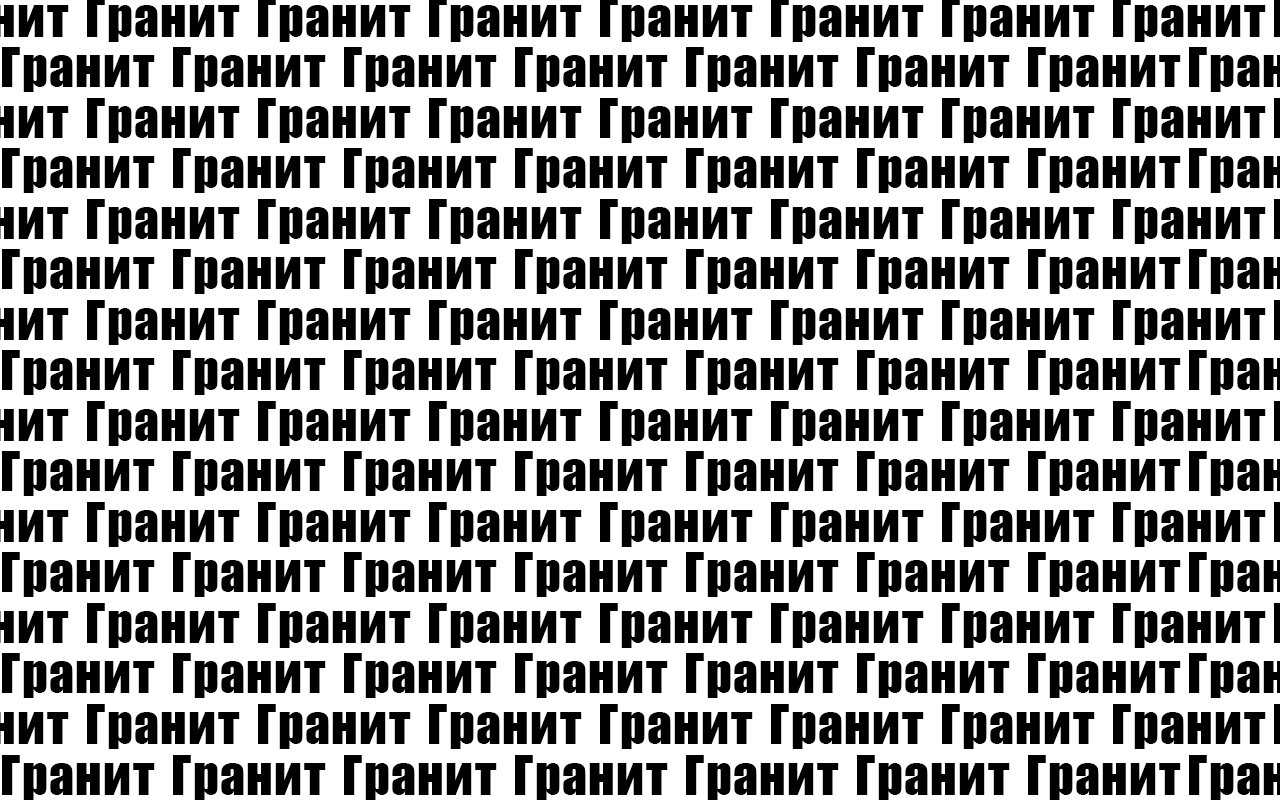
<style>
.page{position:relative;width:1280px;height:800px;background:#ffffff}
.page>*{position:absolute;margin:0}
.t1{font:50px "Impact";letter-spacing:0.025em;color:#000000}
</style>
<div class="page">
<p class="t1" style="left:2px;top:47px;width:153px;height:45px">Гранит</p>
<p class="t1" style="left:173px;top:47px;width:153px;height:45px">Гранит</p>
<p class="t1" style="left:344px;top:47px;width:153px;height:45px">Гранит</p>
<p class="t1" style="left:515px;top:47px;width:153px;height:45px">Гранит</p>
<p class="t1" style="left:686px;top:47px;width:153px;height:45px">Гранит</p>
<p class="t1" style="left:857px;top:47px;width:153px;height:45px">Гранит</p>
<p class="t1" style="left:1028px;top:47px;width:153px;height:45px">Гранит</p>
<p class="t1" style="left:87px;top:98px;width:153px;height:45px">Гранит</p>
<p class="t1" style="left:258px;top:98px;width:153px;height:45px">Гранит</p>
<p class="t1" style="left:429px;top:98px;width:153px;height:45px">Гранит</p>
<p class="t1" style="left:600px;top:98px;width:153px;height:45px">Гранит</p>
<p class="t1" style="left:771px;top:98px;width:153px;height:45px">Гранит</p>
<p class="t1" style="left:942px;top:98px;width:153px;height:45px">Гранит</p>
<p class="t1" style="left:1113px;top:98px;width:153px;height:45px">Гранит</p>
<p class="t1" style="left:2px;top:148px;width:153px;height:45px">Гранит</p>
<p class="t1" style="left:173px;top:148px;width:153px;height:45px">Гранит</p>
<p class="t1" style="left:344px;top:148px;width:153px;height:45px">Гранит</p>
<p class="t1" style="left:515px;top:148px;width:153px;height:45px">Гранит</p>
<p class="t1" style="left:686px;top:148px;width:153px;height:45px">Гранит</p>
<p class="t1" style="left:857px;top:148px;width:153px;height:45px">Гранит</p>
<p class="t1" style="left:1028px;top:148px;width:153px;height:45px">Гранит</p>
<p class="t1" style="left:87px;top:199px;width:153px;height:45px">Гранит</p>
<p class="t1" style="left:258px;top:199px;width:153px;height:45px">Гранит</p>
<p class="t1" style="left:429px;top:199px;width:153px;height:45px">Гранит</p>
<p class="t1" style="left:600px;top:199px;width:153px;height:45px">Гранит</p>
<p class="t1" style="left:771px;top:199px;width:153px;height:45px">Гранит</p>
<p class="t1" style="left:942px;top:199px;width:153px;height:45px">Гранит</p>
<p class="t1" style="left:1113px;top:199px;width:153px;height:45px">Гранит</p>
<p class="t1" style="left:2px;top:249px;width:153px;height:45px">Гранит</p>
<p class="t1" style="left:173px;top:249px;width:153px;height:45px">Гранит</p>
<p class="t1" style="left:344px;top:249px;width:153px;height:45px">Гранит</p>
<p class="t1" style="left:515px;top:249px;width:153px;height:45px">Гранит</p>
<p class="t1" style="left:686px;top:249px;width:153px;height:45px">Гранит</p>
<p class="t1" style="left:857px;top:249px;width:153px;height:45px">Гранит</p>
<p class="t1" style="left:1028px;top:249px;width:153px;height:45px">Гранит</p>
<p class="t1" style="left:87px;top:300px;width:153px;height:45px">Гранит</p>
<p class="t1" style="left:258px;top:300px;width:153px;height:45px">Гранит</p>
<p class="t1" style="left:429px;top:300px;width:153px;height:45px">Гранит</p>
<p class="t1" style="left:600px;top:300px;width:153px;height:45px">Гранит</p>
<p class="t1" style="left:771px;top:300px;width:153px;height:45px">Гранит</p>
<p class="t1" style="left:942px;top:300px;width:153px;height:45px">Гранит</p>
<p class="t1" style="left:1113px;top:300px;width:153px;height:45px">Гранит</p>
<p class="t1" style="left:2px;top:350px;width:153px;height:45px">Гранит</p>
<p class="t1" style="left:173px;top:350px;width:153px;height:45px">Гранит</p>
<p class="t1" style="left:344px;top:350px;width:153px;height:45px">Гранит</p>
<p class="t1" style="left:515px;top:350px;width:153px;height:45px">Гранит</p>
<p class="t1" style="left:686px;top:350px;width:153px;height:45px">Гранит</p>
<p class="t1" style="left:857px;top:350px;width:153px;height:45px">Гранит</p>
<p class="t1" style="left:1028px;top:350px;width:153px;height:45px">Гранит</p>
<p class="t1" style="left:87px;top:401px;width:153px;height:45px">Гранит</p>
<p class="t1" style="left:258px;top:401px;width:153px;height:45px">Гранит</p>
<p class="t1" style="left:429px;top:401px;width:153px;height:45px">Гранит</p>
<p class="t1" style="left:600px;top:401px;width:153px;height:45px">Гранит</p>
<p class="t1" style="left:771px;top:401px;width:153px;height:45px">Гранит</p>
<p class="t1" style="left:942px;top:401px;width:153px;height:45px">Гранит</p>
<p class="t1" style="left:1113px;top:401px;width:153px;height:45px">Гранит</p>
<p class="t1" style="left:2px;top:451px;width:153px;height:45px">Гранит</p>
<p class="t1" style="left:173px;top:451px;width:153px;height:45px">Гранит</p>
<p class="t1" style="left:344px;top:451px;width:153px;height:45px">Гранит</p>
<p class="t1" style="left:515px;top:451px;width:153px;height:45px">Гранит</p>
<p class="t1" style="left:686px;top:451px;width:153px;height:45px">Гранит</p>
<p class="t1" style="left:857px;top:451px;width:153px;height:45px">Гранит</p>
<p class="t1" style="left:1028px;top:451px;width:153px;height:45px">Гранит</p>
<p class="t1" style="left:87px;top:502px;width:153px;height:45px">Гранит</p>
<p class="t1" style="left:258px;top:502px;width:153px;height:45px">Гранит</p>
<p class="t1" style="left:429px;top:502px;width:153px;height:45px">Гранит</p>
<p class="t1" style="left:600px;top:502px;width:153px;height:45px">Гранит</p>
<p class="t1" style="left:771px;top:502px;width:153px;height:45px">Гранит</p>
<p class="t1" style="left:942px;top:502px;width:153px;height:45px">Гранит</p>
<p class="t1" style="left:1113px;top:502px;width:153px;height:45px">Гранит</p>
<p class="t1" style="left:2px;top:552px;width:153px;height:45px">Гранит</p>
<p class="t1" style="left:173px;top:552px;width:153px;height:45px">Гранит</p>
<p class="t1" style="left:344px;top:552px;width:153px;height:45px">Гранит</p>
<p class="t1" style="left:515px;top:552px;width:153px;height:45px">Гранит</p>
<p class="t1" style="left:686px;top:552px;width:153px;height:45px">Гранит</p>
<p class="t1" style="left:857px;top:552px;width:153px;height:45px">Гранит</p>
<p class="t1" style="left:1028px;top:552px;width:153px;height:45px">Гранит</p>
<p class="t1" style="left:87px;top:603px;width:153px;height:45px">Гранит</p>
<p class="t1" style="left:258px;top:603px;width:153px;height:45px">Гранит</p>
<p class="t1" style="left:429px;top:603px;width:153px;height:45px">Гранит</p>
<p class="t1" style="left:600px;top:603px;width:153px;height:45px">Гранит</p>
<p class="t1" style="left:771px;top:603px;width:153px;height:45px">Гранит</p>
<p class="t1" style="left:942px;top:603px;width:153px;height:45px">Гранит</p>
<p class="t1" style="left:1113px;top:603px;width:153px;height:45px">Гранит</p>
<p class="t1" style="left:2px;top:653px;width:153px;height:45px">Гранит</p>
<p class="t1" style="left:173px;top:653px;width:153px;height:45px">Гранит</p>
<p class="t1" style="left:344px;top:653px;width:153px;height:45px">Гранит</p>
<p class="t1" style="left:515px;top:653px;width:153px;height:45px">Гранит</p>
<p class="t1" style="left:686px;top:653px;width:153px;height:45px">Гранит</p>
<p class="t1" style="left:857px;top:653px;width:153px;height:45px">Гранит</p>
<p class="t1" style="left:1028px;top:653px;width:153px;height:45px">Гранит</p>
<p class="t1" style="left:87px;top:704px;width:153px;height:45px">Гранит</p>
<p class="t1" style="left:258px;top:704px;width:153px;height:45px">Гранит</p>
<p class="t1" style="left:429px;top:704px;width:153px;height:45px">Гранит</p>
<p class="t1" style="left:600px;top:704px;width:153px;height:45px">Гранит</p>
<p class="t1" style="left:771px;top:704px;width:153px;height:45px">Гранит</p>
<p class="t1" style="left:942px;top:704px;width:153px;height:45px">Гранит</p>
<p class="t1" style="left:1113px;top:704px;width:153px;height:45px">Гранит</p>
<p class="t1" style="left:2px;top:755px;width:153px;height:45px">Гранит</p>
<p class="t1" style="left:173px;top:755px;width:153px;height:45px">Гранит</p>
<p class="t1" style="left:344px;top:755px;width:153px;height:45px">Гранит</p>
<p class="t1" style="left:515px;top:755px;width:153px;height:45px">Гранит</p>
<p class="t1" style="left:686px;top:755px;width:153px;height:45px">Гранит</p>
<p class="t1" style="left:857px;top:755px;width:153px;height:45px">Гранит</p>
<p class="t1" style="left:1028px;top:755px;width:153px;height:45px">Гранит</p>
</div>
